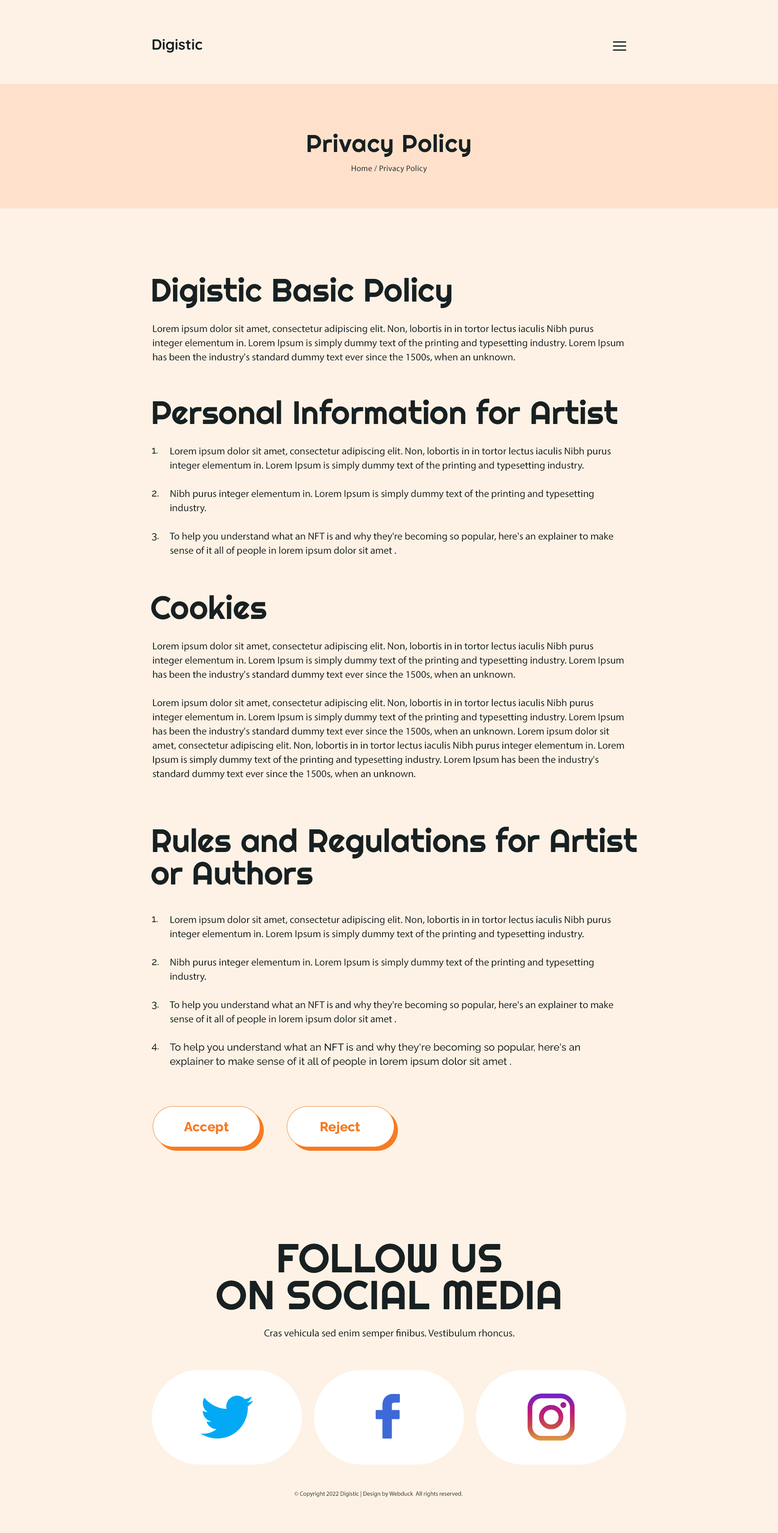
<style>
.page{position:relative;width:778px;height:1533px;background:#fdf2e5}
.page>*{position:absolute;margin:0}
.t1{font:24.3px "Righteous-Regular";letter-spacing:0.02em;color:#182022}
.t2{font:8.1px "Raleway-Medium";letter-spacing:0.02em;color:#182022}
.t3{font:32.4px "Righteous-Regular";color:#182022}
.t4{font:10.1px/14.2px "Raleway-Medium";color:#182022}
.t5{font:10.1px "Raleway-Medium";color:#182022}
.t6{font:32.4px/32.4px "Righteous-Regular";color:#182022}
.t7{font:13.1px "Raleway-ExtraBold";color:#f77b21}
.t8{font:40.5px/36.9px "Righteous-Regular";color:#182022;text-transform:uppercase}
.t9{font:6.1px "Raleway-Medium";color:#182022}
</style>
<div class="page">
<p class="t1" style="left:308px;top:133px;width:162px;height:24px">Privacy Policy</p>
<p class="t2" style="left:352px;top:165px;width:75px;height:8px">Home / Privacy Policy</p>
<p class="t3" style="left:152px;top:277px;width:299px;height:31px">Digistic Basic Policy</p>
<p class="t4" style="left:153px;top:325px;width:471px;height:38px">Lorem ipsum dolor sit amet, consectetur adipiscing elit. Non, lobortis in in tortor lectus iaculis Nibh purus integer elementum in. Lorem Ipsum is simply dummy text of the printing and typesetting industry. Lorem Ipsum has been the industry's standard dummy text ever since the 1500s, when an unknown.</p>
<p class="t3" style="left:153px;top:398px;width:465px;height:26px">Personal Information for Artist</p>
<p class="t5" style="left:152px;top:447px;width:6px;height:6px">1.</p>
<p class="t4" style="left:170px;top:447px;width:444px;height:109px">Lorem ipsum dolor sit amet, consectetur adipiscing elit. Non, lobortis in in tortor lectus iaculis Nibh purus integer elementum in. Lorem Ipsum is simply dummy text of the printing and typesetting industry.<br><br>Nibh purus integer elementum in. Lorem Ipsum is simply dummy text of the printing and typesetting industry.<br><br>To help you understand what an NFT is and why they're becoming so popular, here's an explainer to make sense of it all of people in lorem ipsum dolor sit amet .</p>
<p class="t5" style="left:152px;top:490px;width:6px;height:6px">2.</p>
<p class="t5" style="left:152px;top:533px;width:6px;height:8px">3.</p>
<p class="t3" style="left:151px;top:594px;width:116px;height:26px">Cookies</p>
<p class="t4" style="left:152px;top:642px;width:472px;height:137px">Lorem ipsum dolor sit amet, consectetur adipiscing elit. Non, lobortis in in tortor lectus iaculis Nibh purus integer elementum in. Lorem Ipsum is simply dummy text of the printing and typesetting industry. Lorem Ipsum has been the industry's standard dummy text ever since the 1500s, when an unknown.<br><br>Lorem ipsum dolor sit amet, consectetur adipiscing elit. Non, lobortis in in tortor lectus iaculis Nibh purus integer elementum in. Lorem Ipsum is simply dummy text of the printing and typesetting industry. Lorem Ipsum has been the industry's standard dummy text ever since the 1500s, when an unknown. Lorem ipsum dolor sit amet, consectetur adipiscing elit. Non, lobortis in in tortor lectus iaculis Nibh purus integer elementum in. Lorem Ipsum is simply dummy text of the printing and typesetting industry. Lorem Ipsum has been the industry's standard dummy text ever since the 1500s, when an unknown.</p>
<p class="t6" style="left:151px;top:826px;width:486px;height:59px">Rules and Regulations for Artist<br>or Authors</p>
<p class="t5" style="left:152px;top:916px;width:6px;height:6px">1.</p>
<p class="t4" style="left:170px;top:915px;width:444px;height:152px">Lorem ipsum dolor sit amet, consectetur adipiscing elit. Non, lobortis in in tortor lectus iaculis Nibh purus integer elementum in. Lorem Ipsum is simply dummy text of the printing and typesetting industry.<br><br>Nibh purus integer elementum in. Lorem Ipsum is simply dummy text of the printing and typesetting industry.<br><br>To help you understand what an NFT is and why they're becoming so popular, here's an explainer to make sense of it all of people in lorem ipsum dolor sit amet .</p>
<p class="t5" style="left:152px;top:959px;width:6px;height:6px">2.</p>
<p class="t5" style="left:152px;top:1001px;width:6px;height:8px">3.</p>
<p class="t5" style="left:152px;top:1043px;width:7px;height:8px">4.</p>
<p class="t7" style="left:184px;top:1122px;width:45px;height:12px">Accept</p>
<p class="t7" style="left:321px;top:1121px;width:39px;height:13px">Reject</p>
<p class="t8" style="left:216px;top:1243px;width:344px;height:67px;text-align:center">FOLLOW US<br>ON SOCIAL MEDIA</p>
<p class="t5" style="left:264px;top:1329px;width:251px;height:9px">Cras vehicula sed enim semper finibus. Vestibulum rhoncus.</p>
<p class="t9" style="left:295px;top:1490px;width:167px;height:7px">© Copyright 2022 Digistic | Design by Webduck  All rights reserved.</p>
</div>
